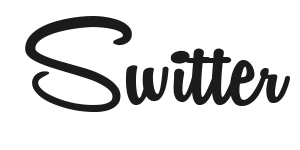
<style>
.page{position:relative;width:300px;height:150px;background:#ffffff}
.page>*{position:absolute;margin:0}
.t1{font:133.5px "RemachineScriptPersonalUse";color:#1b1b1b}
</style>
<div class="page">
<p class="t1" style="left:25px;top:16px;width:265px;height:96px">Switter</p>
</div>
